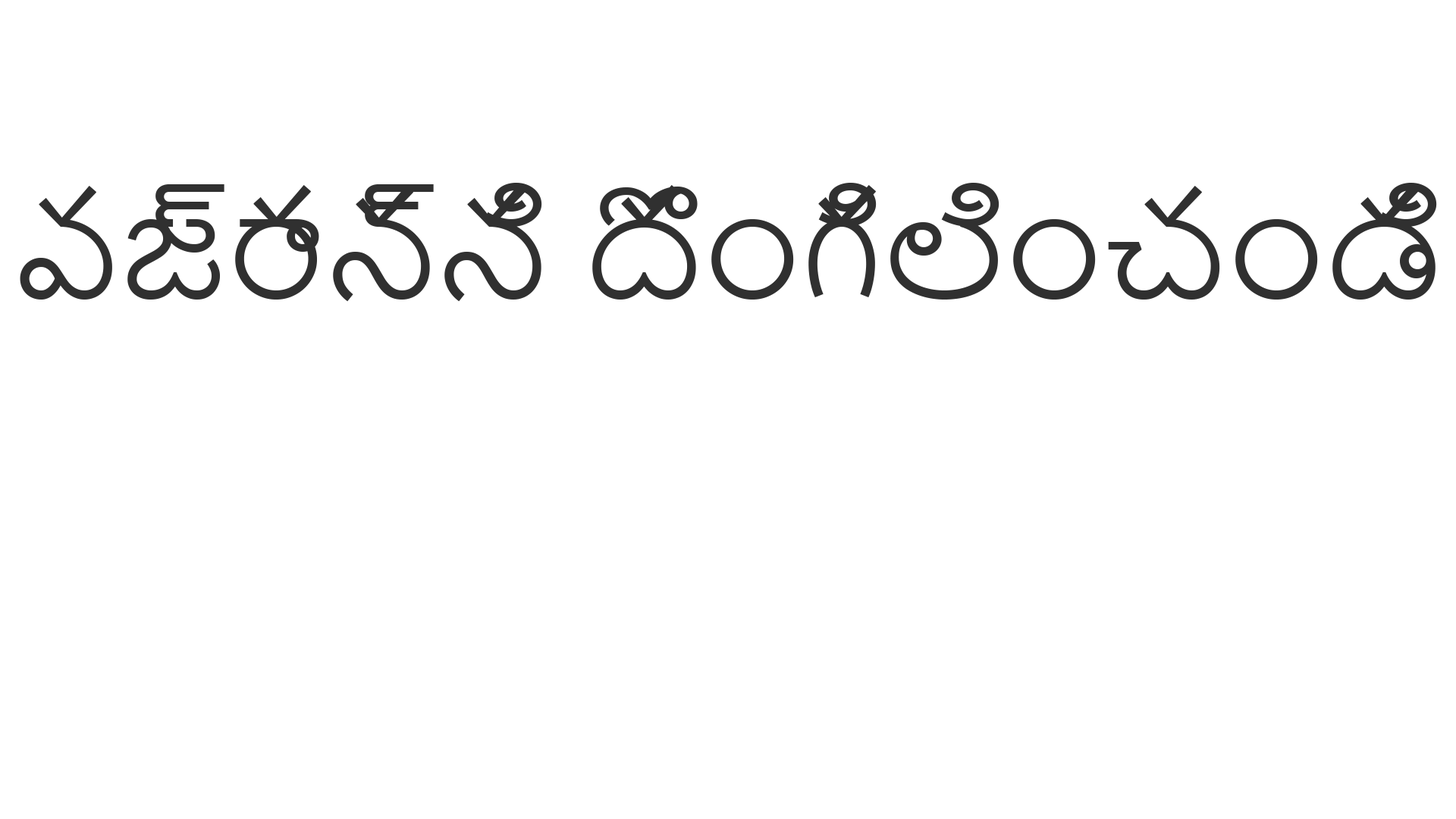
<style>
.page{position:relative;width:1456px;height:819px;background:#ffffff}
.page>*{position:absolute;margin:0}
.t1{font:132.7px "NirmalaUI";color:#303030}
</style>
<div class="page">
<p class="t1" style="left:20px;top:183px;width:1417px;height:119px">వజ్రాన్ని దొంగిలించండి</p>
</div>
